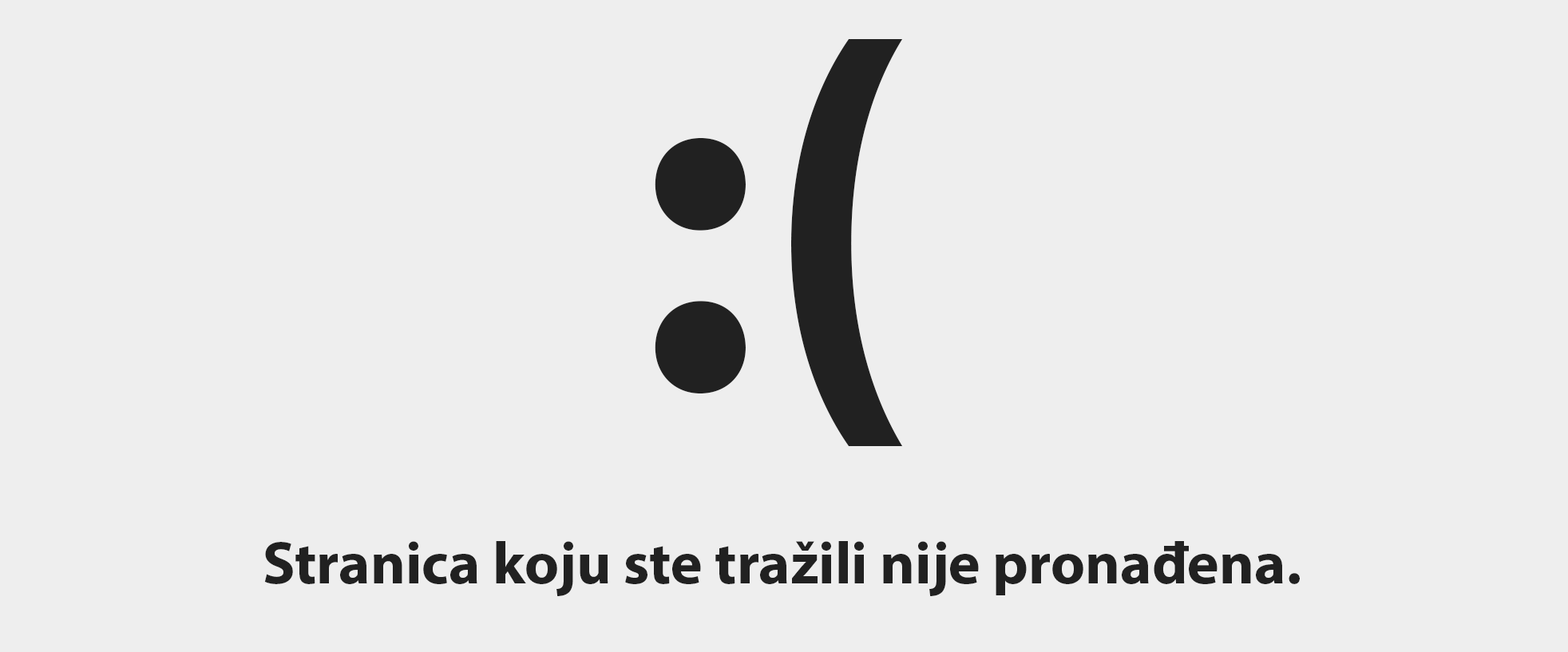
<style>
.page{position:relative;width:1568px;height:652px;background:#eeeeee}
.page>*{position:absolute;margin:0}
.t1{font:504.6px "MyriadPro-Bold";color:#212121}
.t2{font:59.9px "MyriadPro-Bold";color:#212121}
</style>
<div class="page">
<p class="t1" style="left:655px;top:39px;width:248px;height:407px">:(</p>
<p class="t2" style="left:264px;top:541px;width:1036px;height:55px">Stranica koju ste tražili nije pronađena.</p>
</div>
